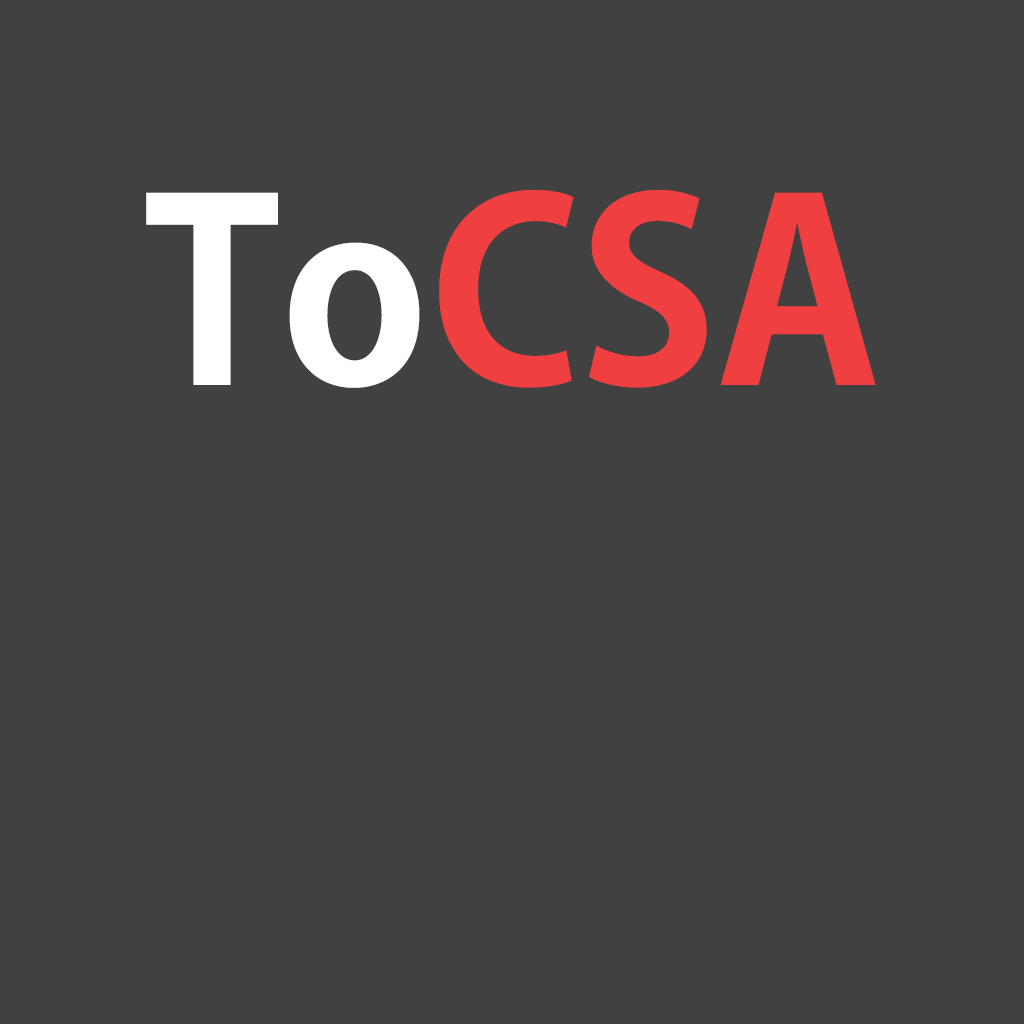
<style>
.page{position:relative;width:1024px;height:1024px;background:#414141}
.page>*{position:absolute;margin:0}
.t1{font:250px "AdobeGothicStd-Bold";color:#ef3f40}
.t2{font:250px "AdobeGothicStd-Bold";color:#ffffff}
</style>
<div class="page">
<p class="t1" style="left:146px;top:190px;width:730px;height:198px"><span class="t2">To</span>CSA</p>
</div>
